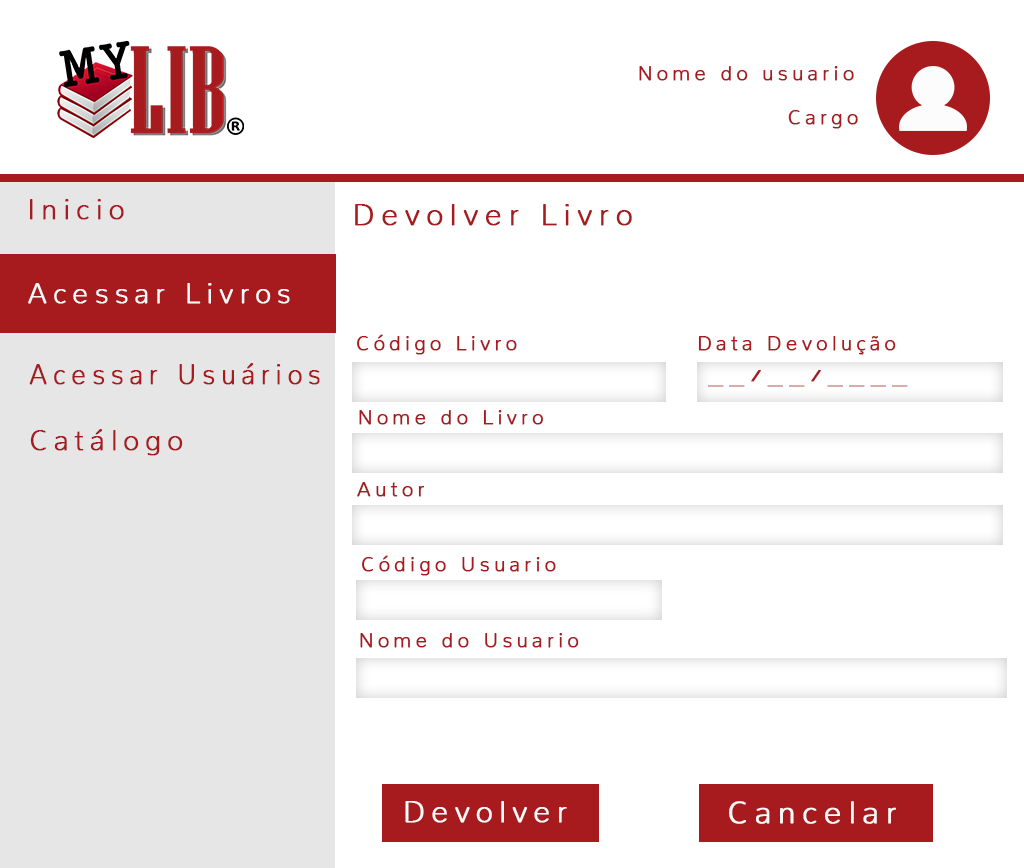
<style>
.page{position:relative;width:1024px;height:868px;background:#ffffff}
.page>*{position:absolute;margin:0}
.t1{font:20px "Nunito-ExtraLight";letter-spacing:0.2em;color:#a71b1e;font-weight:bold}
.t2{font:28px "Nunito-ExtraLight";letter-spacing:0.2em;color:#a71b1e;font-weight:bold}
.t3{font:30px "Nunito-ExtraLight";letter-spacing:0.2em;color:#a71b1e;font-weight:bold}
.t4{font:28px "Nunito-ExtraLight";letter-spacing:0.2em;color:#fbf9f9;font-weight:bold}
.t5{font:28px "Nunito-ExtraLight";letter-spacing:0.2em;color:#a71b1e;font-weight:bold;scale:0.94 1}
.t6{font:20px "Nunito-ExtraLight";letter-spacing:0.2em;color:#a71b1e;font-weight:bold;scale:1.47 1}
.t7{font:29.6px "Nunito-ExtraLight";letter-spacing:0.2em;color:#fcfbfb;font-weight:bold}
.t8{font:31.2px "Nunito-ExtraLight";letter-spacing:0.2em;color:#fbf8f8;font-weight:bold}
</style>
<div class="page">
<p class="t1" style="left:639px;top:66px;width:215px;height:15px">Nome do usuario</p>
<p class="t1" style="left:788px;top:110px;width:70px;height:19px">Cargo</p>
<p class="t2" style="left:30px;top:199px;width:94px;height:21px">Inicio</p>
<p class="t3" style="left:355px;top:204px;width:277px;height:22px">Devolver Livro</p>
<p class="t4" style="left:28px;top:283px;width:262px;height:21px">Acessar Livros</p>
<p class="t1" style="left:357px;top:334px;width:160px;height:21px">Código Livro</p>
<p class="t1" style="left:698px;top:336px;width:198px;height:19px">Data Devolução</p>
<p class="t5" style="left:29px;top:363px;width:291px;height:22px">Acessar Usuários</p>
<p class="t6" style="left:708px;top:370px;width:200px;height:17px">__/__/____</p>
<p class="t1" style="left:359px;top:410px;width:184px;height:15px">Nome do Livro</p>
<p class="t2" style="left:30px;top:429px;width:153px;height:27px">Catálogo</p>
<p class="t1" style="left:357px;top:482px;width:68px;height:15px">Autor</p>
<p class="t1" style="left:362px;top:555px;width:194px;height:21px">Código Usuario</p>
<p class="t1" style="left:360px;top:633px;width:219px;height:15px">Nome do Usuario</p>
<p class="t7" style="left:405px;top:801px;width:162px;height:22px">Devolver</p>
<p class="t8" style="left:729px;top:801px;width:167px;height:23px">Cancelar</p>
</div>
